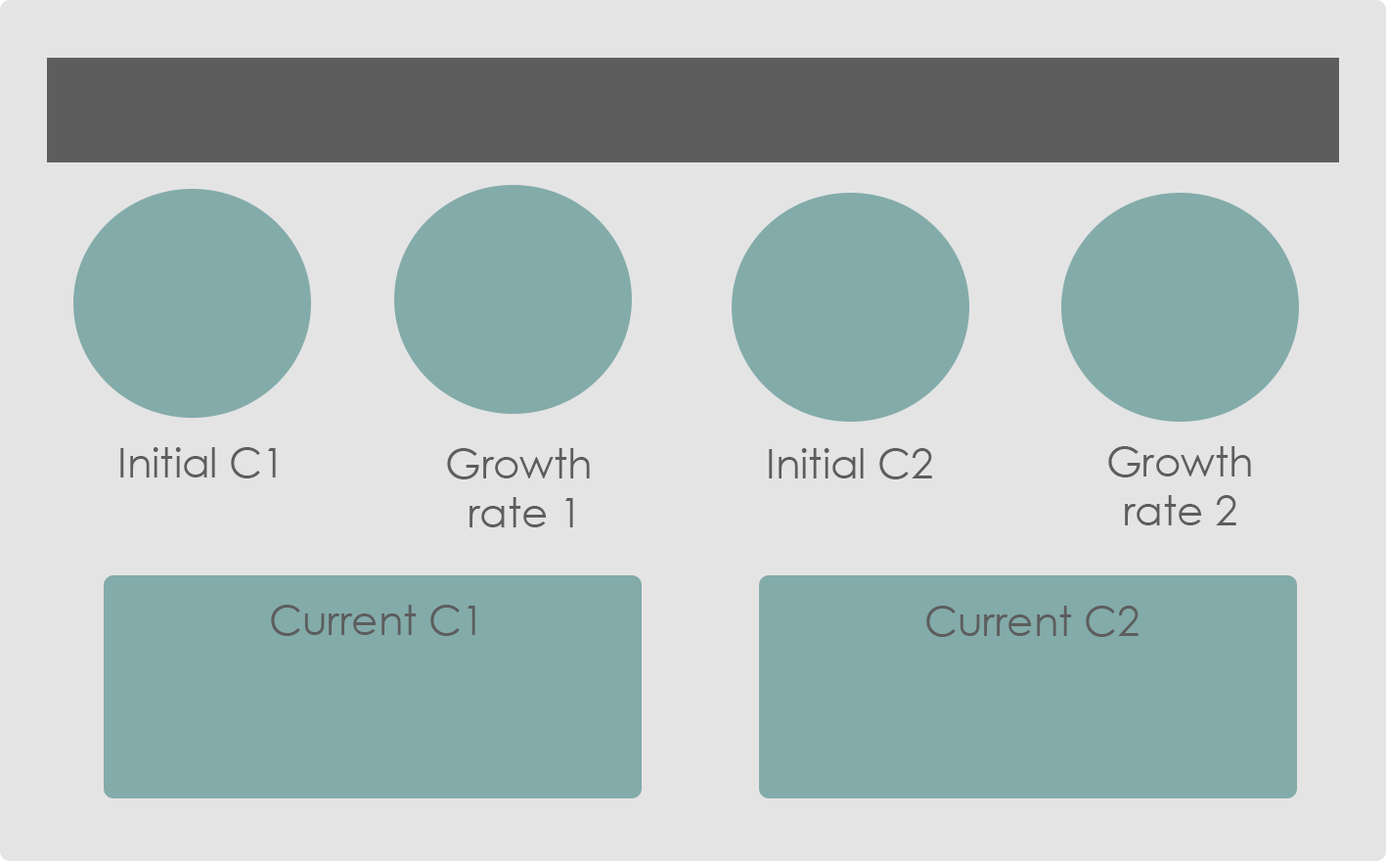
<style>
.page{position:relative;width:1386px;height:861px;background:#e4e4e4}
.page>*{position:absolute;margin:0}
.t1{font:40.7px "CenturyGothic";color:#5d5d5d}
</style>
<div class="page">
<p class="t1" style="left:120px;top:447px;width:156px;height:31px">Initial C1</p>
<p class="t1" style="left:447px;top:448px;width:143px;height:79px;text-align:center">Growth <br>rate 1</p>
<p class="t1" style="left:769px;top:448px;width:163px;height:31px">Initial C2</p>
<p class="t1" style="left:1108px;top:446px;width:143px;height:79px;text-align:center">Growth<br>rate 2</p>
<p class="t1" style="left:271px;top:604px;width:204px;height:32px">Current C1</p>
<p class="t1" style="left:926px;top:605px;width:212px;height:32px">Current C2</p>
</div>
